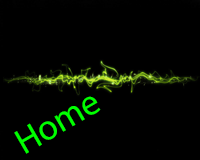
<style>
.page{position:relative;width:200px;height:160px;background:#000000}
.page>*{position:absolute;margin:0}
.t1{font:36px "MyriadPro-Regular";color:#00ff00}
</style>
<div class="page">
<p class="t1" style="left:14px;top:96px;width:87px;height:58px;rotate:-30deg">Home</p>
</div>
